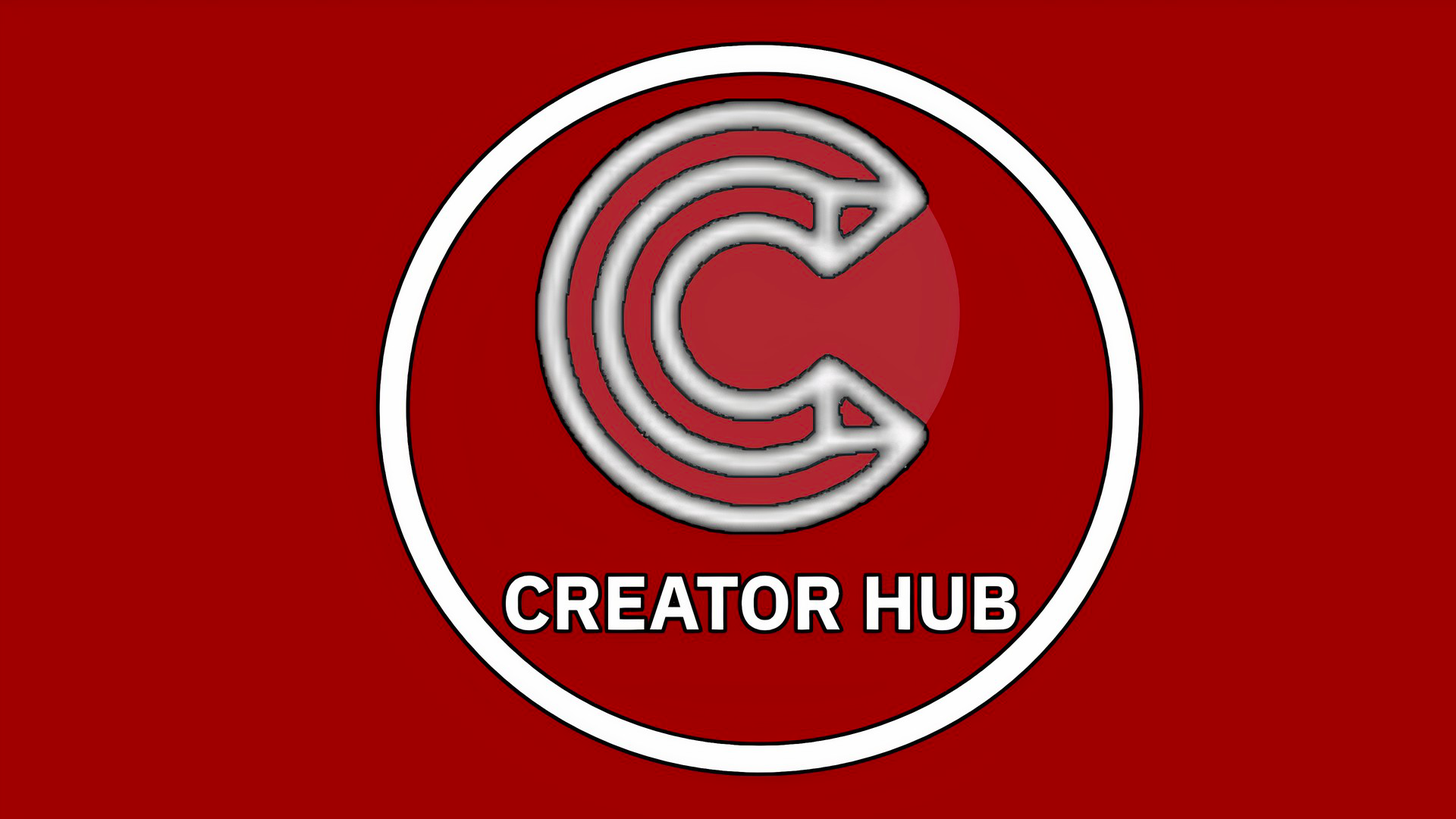
<style>
.page{position:relative;width:1456px;height:819px;background:#9f0000}
.page>*{position:absolute;margin:0}
.t1{font:75.8px "IBMPlexSans-Bold";color:#ffffff}
</style>
<div class="page">
<p class="t1" style="left:505px;top:576px;width:511px;height:55px">CREATOR HUB</p>
</div>
